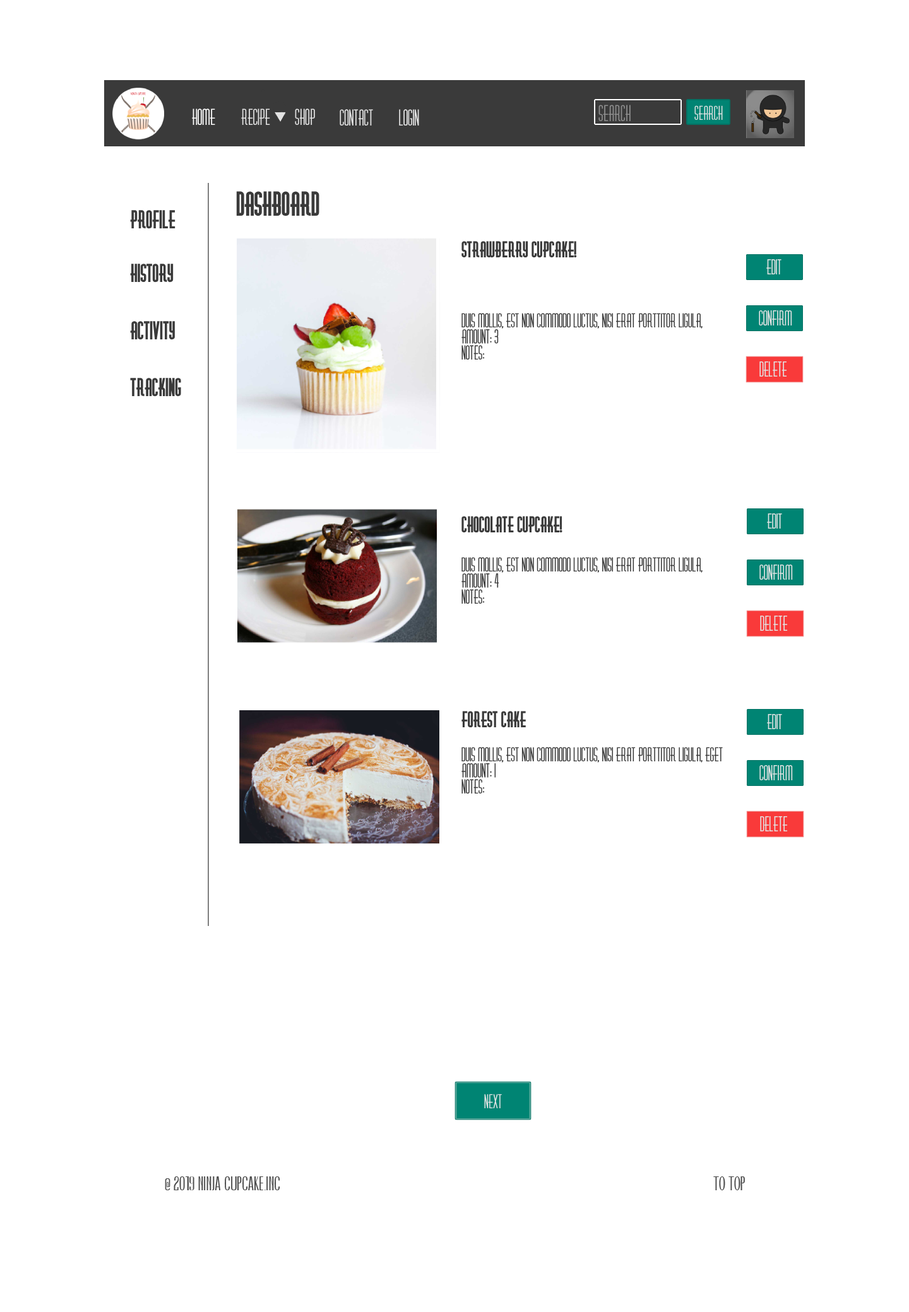
<style>
.page{position:relative;width:909px;height:1312px;background:#ffffff}
.page>*{position:absolute;margin:0}
.t1{font:20.2px "Diner-Fatt";color:#ffffff}
.t2{font:20.2px "Diner-Fatt";color:#e3e3e3}
.t3{font:20.2px "Diner-Fatt";color:#8e8e8e}
.t4{font:17.7px "Diner-Fatt";color:#e3e3e3}
.t5{font:30.3px "Diner-Obese";color:#3a3a3a}
.t6{font:22.7px "Diner-Obese";color:#3a3a3a}
.t7{font:20.2px "Diner-Obese";color:#3a3a3a}
.t8{font:18.9px "Diner-Fatt";color:#e3e3e3}
.t9{font:17.7px "Diner-Fatt";color:#3a3a3a}
.t10{font:15.1px "Caledo-Bold";color:#4a4a4a}
</style>
<div class="page">
<p class="t1" style="left:192px;top:109px;width:23px;height:16px">HOme</p>
<p class="t2" style="left:241px;top:109px;width:29px;height:17px">recipe</p>
<p class="t2" style="left:295px;top:109px;width:20px;height:16px">shop</p>
<p class="t2" style="left:339px;top:109px;width:34px;height:17px">contact</p>
<p class="t2" style="left:399px;top:109px;width:20px;height:17px">login</p>
<p class="t3" style="left:598px;top:105px;width:32px;height:17px">search</p>
<p class="t4" style="left:694px;top:105px;width:28px;height:15px">search</p>
<p class="t5" style="left:236px;top:191px;width:83px;height:25px">dashboard</p>
<p class="t6" style="left:130px;top:210px;width:45px;height:19px">profile</p>
<p class="t7" style="left:461px;top:241px;width:116px;height:17px">strawberry cupcake!</p>
<p class="t6" style="left:130px;top:264px;width:44px;height:19px">history</p>
<p class="t8" style="left:766px;top:259px;width:15px;height:16px">edit</p>
<p class="t9" style="left:461px;top:313px;width:241px;height:47px">Duis mollis, est non commodo luctus, nisi erat porttitor ligula, <br>amount: 3<br>notes:</p>
<p class="t8" style="left:758px;top:310px;width:34px;height:16px">confirm</p>
<p class="t6" style="left:130px;top:321px;width:45px;height:19px">activity</p>
<p class="t8" style="left:759px;top:362px;width:28px;height:15px">delete</p>
<p class="t6" style="left:130px;top:378px;width:51px;height:19px">tracking</p>
<p class="t7" style="left:461px;top:516px;width:101px;height:17px">chocolate cupcake!</p>
<p class="t8" style="left:767px;top:514px;width:15px;height:15px">edit</p>
<p class="t9" style="left:461px;top:557px;width:241px;height:47px">Duis mollis, est non commodo luctus, nisi erat porttitor ligula, <br>amount: 4<br>notes:</p>
<p class="t8" style="left:759px;top:564px;width:33px;height:16px">confirm</p>
<p class="t8" style="left:760px;top:616px;width:27px;height:16px">delete</p>
<p class="t7" style="left:461px;top:711px;width:65px;height:17px">Forest Cake</p>
<p class="t8" style="left:767px;top:714px;width:15px;height:16px">edit</p>
<p class="t9" style="left:461px;top:747px;width:261px;height:47px">Duis mollis, est non commodo luctus, nisi erat porttitor ligula, eget <br>amount: 1<br>notes:</p>
<p class="t8" style="left:759px;top:765px;width:33px;height:16px">confirm</p>
<p class="t8" style="left:760px;top:816px;width:27px;height:16px">delete</p>
<p class="t4" style="left:484px;top:1094px;width:18px;height:15px">next</p>
<p class="t10" style="left:165px;top:1177px;width:115px;height:14px">@ 2019 Ninja cupcake.inc</p>
<p class="t10" style="left:713px;top:1177px;width:32px;height:14px">to top</p>
</div>
